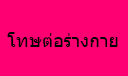
<style>
.page{position:relative;width:128px;height:76px;background:#ff0072}
.page>*{position:absolute;margin:0}
.t1{font:18px "Tahoma";color:#000203}
</style>
<div class="page">
<p class="t1" style="left:7px;top:32px;width:111px;height:15px">โทษต่อร่างกาย</p>
</div>
